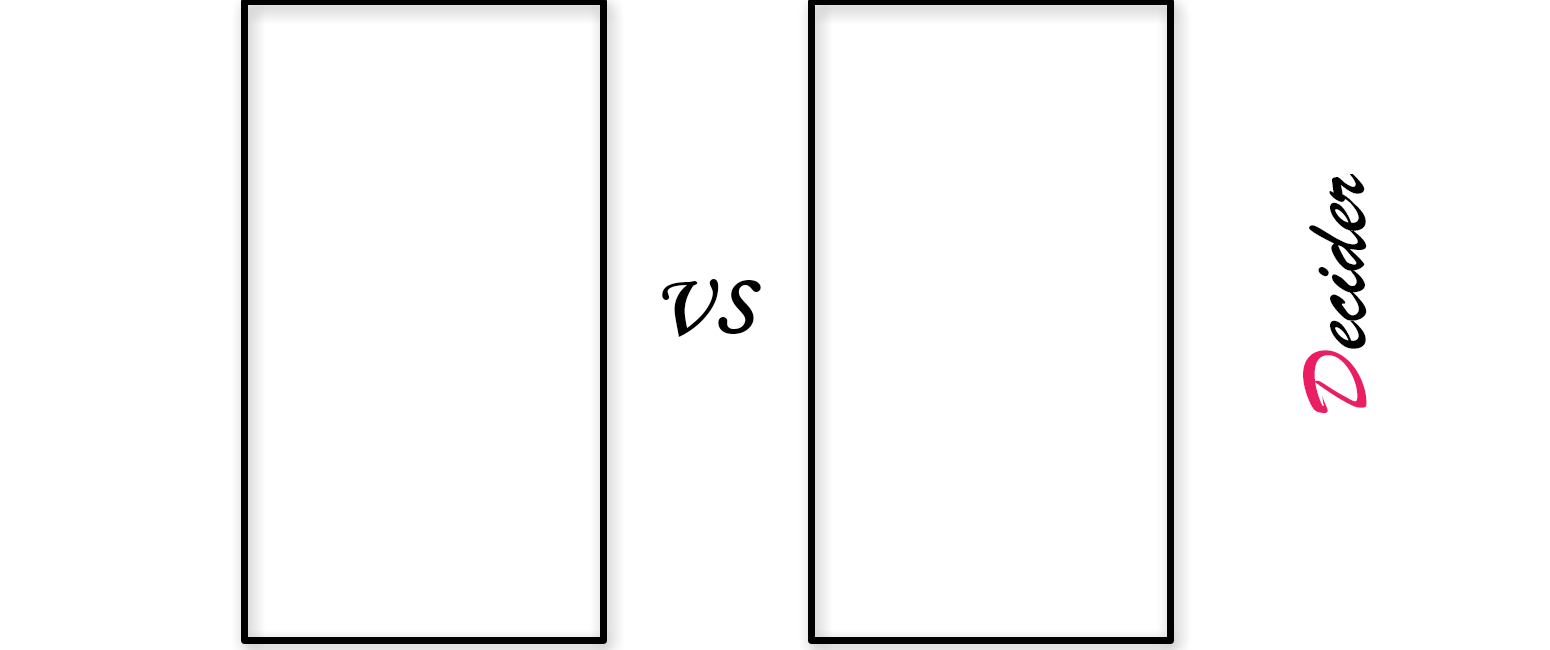
<style>
.page{position:relative;width:1550px;height:650px;background:#ffffff}
.page>*{position:absolute;margin:0}
.t1{font:96.2px "BrushScriptMT";color:#000000}
.t2{font:96.2px "BrushScriptMT";color:#e91e63}
.t3{font:130.3px "MonotypeCorsiva";color:#000000}
</style>
<div class="page">
<p class="t1" style="left:1303px;top:174px;width:64px;height:239px;rotate:-90deg"><span class="t2">D</span>ecider</p>
<p class="t3" style="left:662px;top:279px;width:99px;height:58px">vs</p>
</div>
